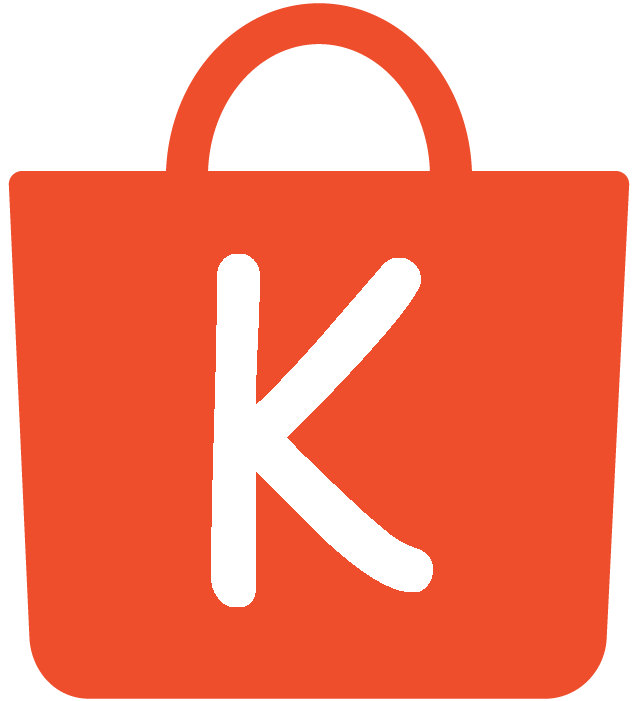
<style>
.page{position:relative;width:638px;height:701px;background:#ee4e2c}
.page>*{position:absolute;margin:0}
.t1{font:440px "ComicSansMS";color:#ffffff}
</style>
<div class="page">
<p class="t1" style="left:211px;top:254px;width:222px;height:353px">K</p>
</div>
